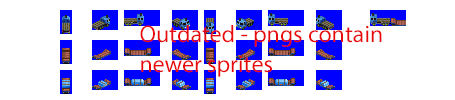
<style>
.page{position:relative;width:455px;height:100px;background:#ffffff}
.page>*{position:absolute;margin:0}
.t1{font:24px/30px "MyriadPro-Regular";color:#e80a0a}
</style>
<div class="page">
<p class="t1" style="left:140px;top:25px;width:242px;height:52px">Outdated - pngs contain<br>newer sprites</p>
</div>
